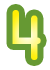
<style>
.page{position:relative;width:50px;height:70px;background:#ffffff}
.page>*{position:absolute;margin:0}
.t1{font:64px "OCRAStd"}
</style>
<div class="page">
<p class="t1" style="left:12px;top:10px;width:29px;height:50px">4</p>
</div>
